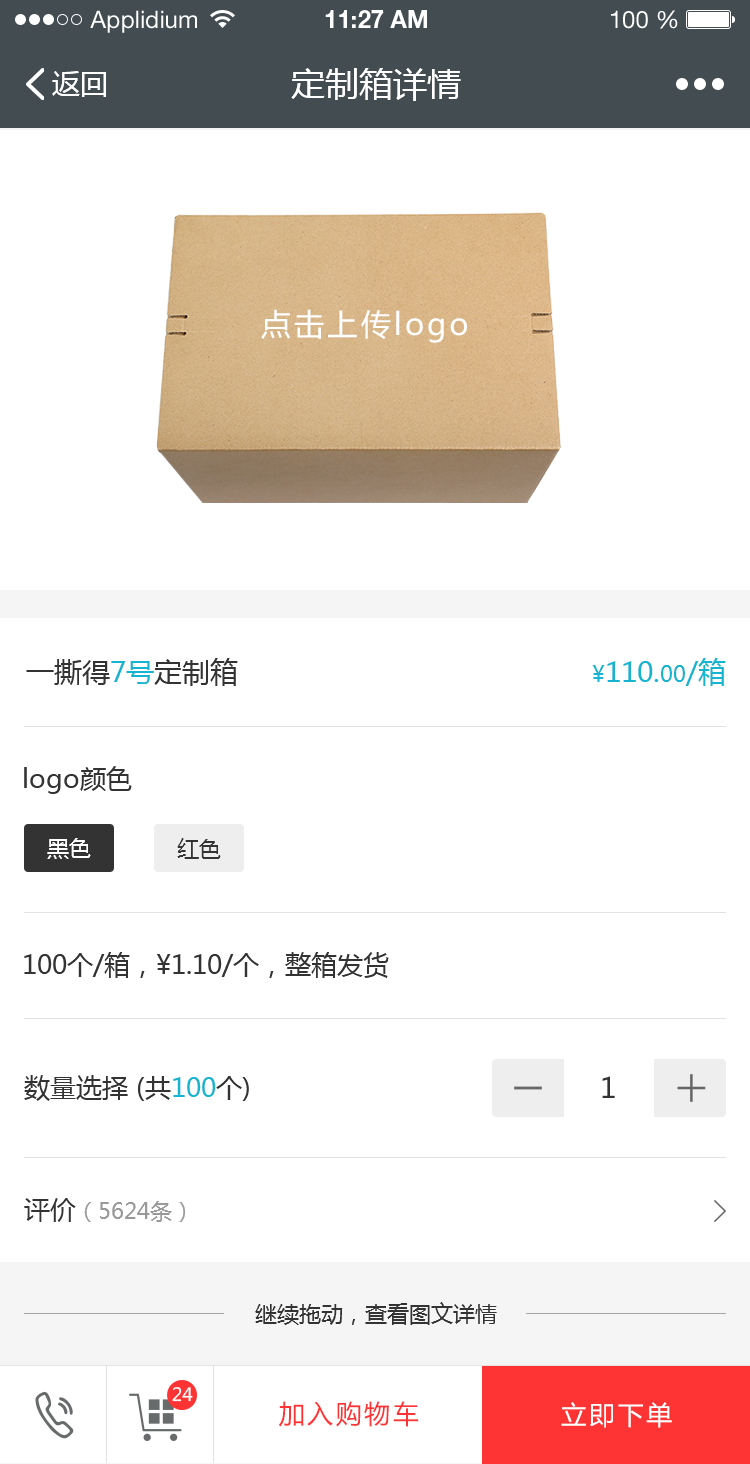
<style>
.page{position:relative;width:750px;height:1464px;background:#ffffff}
.page>*{position:absolute;margin:0}
.t1{font:24px "HelveticaNeueLTStd-Roman";color:#ffffff}
.t2{font:24px "HelveticaNeueLTStd-Bd";color:#ffffff}
.t3{font:28px "MicrosoftYaHei";color:#ffffff}
.t4{font:34px "MicrosoftYaHei";color:#ffffff}
.t5{font:30.2px "MicrosoftYaHei";letter-spacing:0.1em;color:#ffffff}
.t6{font:28px "MicrosoftYaHei";color:#333333}
.t7{font:28px "MicrosoftYaHei";color:#15b4d0}
.t8{font:22px "MicrosoftYaHei";color:#15b4d0}
.t9{font:26px "MicrosoftYaHei";color:#333333}
.t10{font:22px "MicrosoftYaHei";color:#ffffff}
.t11{font:22px "MicrosoftYaHei";color:#333333}
.t12{font:26px "MicrosoftYaHei";color:#15b4d0}
.t13{font:22px "MicrosoftYaHei";color:#999999}
.t14{font:18px "MicrosoftYaHei";color:#ffffff}
.t15{font:26px "MicrosoftYaHei";letter-spacing:0.1em;color:#fe3333}
.t16{font:26px "MicrosoftYaHei";letter-spacing:0.1em;color:#ffffff}
</style>
<div class="page">
<p class="t1" style="left:90px;top:10px;width:107px;height:23px">Applidium</p>
<p class="t2" style="left:325px;top:10px;width:102px;height:18px">11:27 AM</p>
<p class="t1" style="left:611px;top:10px;width:67px;height:19px">100 %</p>
<p class="t3" style="left:52px;top:71px;width:54px;height:26px">返回</p>
<p class="t4" style="left:291px;top:68px;width:170px;height:33px">定制箱详情</p>
<p class="t5" style="left:261px;top:309px;width:206px;height:34px">点击上传logo</p>
<p class="t6" style="left:26px;top:658px;width:212px;height:28px">一撕得<span class="t7">7号</span>定制箱</p>
<p class="t7" style="left:592px;top:658px;width:134px;height:28px"><span class="t8">¥</span>110.<span class="t8">00</span>/箱</p>
<p class="t9" style="left:24px;top:766px;width:108px;height:28px">logo颜色</p>
<p class="t10" style="left:47px;top:838px;width:44px;height:21px">黑色</p>
<p class="t11" style="left:177px;top:838px;width:44px;height:21px">红色</p>
<p class="t9" style="left:24px;top:952px;width:365px;height:26px">100个/箱，¥1.10/个，整箱发货</p>
<p class="t9" style="left:24px;top:1075px;width:225px;height:26px">数量选择 (共<span class="t12">100</span>个)</p>
<p class="t6" style="left:602px;top:1076px;width:13px;height:22px">1</p>
<p class="t13" style="left:24px;top:1198px;width:161px;height:24px"><span class="t9">评价</span>（5624条）</p>
<p class="t11" style="left:255px;top:1302px;width:242px;height:23px">继续拖动，查看图文详情</p>
<p class="t14" style="left:172px;top:1387px;width:21px;height:15px">24</p>
<p class="t15" style="left:279px;top:1401px;width:140px;height:26px">加入购物车</p>
<p class="t16" style="left:561px;top:1402px;width:111px;height:26px">立即下单</p>
</div>
